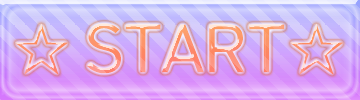
<style>
.page{position:relative;width:360px;height:100px}
.page>*{position:absolute;margin:0}
.t1{font:65px "HCRDotum";letter-spacing:-0.03em;font-weight:bold}
.t2{font:65px "HCRDotum";letter-spacing:0.15em;font-weight:bold}
</style>
<div class="page">
<p class="t1" style="left:15px;top:23px;width:328px;height:52px"><span class="t2">☆</span>START<span class="t2">☆</span></p>
</div>
